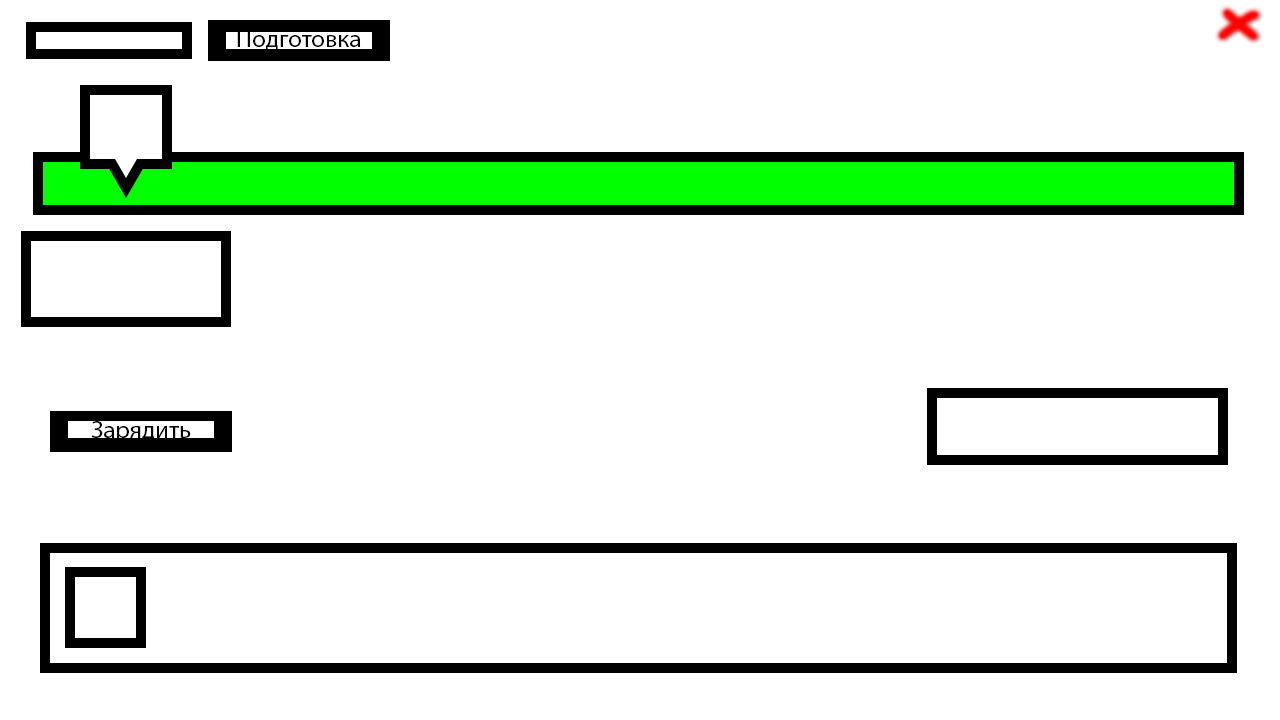
<style>
.page{position:relative;width:1280px;height:720px;background:#ffffff}
.page>*{position:absolute;margin:0}
.t1{font:25px "MyriadPro-Regular";color:#000000}
</style>
<div class="page">
<p class="t1" style="left:237px;top:30px;width:124px;height:21px">Подготовка</p>
<p class="t1" style="left:91px;top:421px;width:100px;height:22px">Зарядить</p>
</div>
